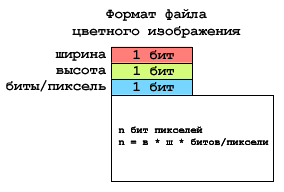
<style>
.page{position:relative;width:284px;height:192px;background:#ffffff}
.page>*{position:absolute;margin:0}
.t1{font:14px "CourierNewPS-BoldMT";color:#030303}
.t2{font:10px "CourierNewPS-BoldMT";color:#030303}
</style>
<div class="page">
<p class="t1" style="left:55px;top:51px;width:51px;height:10px">ширина</p>
<p class="t1" style="left:133px;top:50px;width:41px;height:10px">1 бит</p>
<p class="t1" style="left:56px;top:67px;width:50px;height:8px">высота</p>
<p class="t1" style="left:133px;top:66px;width:41px;height:10px">1 бит</p>
<p class="t1" style="left:6px;top:80px;width:100px;height:12px">биты/пиксель</p>
<p class="t1" style="left:133px;top:82px;width:41px;height:10px">1 бит</p>
<p class="t2" style="left:118px;top:126px;width:151px;height:21px">n бит пикселей<br>n = в * ш * битов/пиксели</p>
</div>
